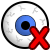
<style>
.page{position:relative;width:50px;height:50px;background:#ffffff}
.page>*{position:absolute;margin:0}
.t1{font:27.8px "ArialRoundedMTBold";color:#f20000;scale:1.11 1}
</style>
<div class="page">
<p class="t1" style="left:30px;top:28px;width:19px;height:20px">X</p>
</div>
